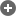
<style>
.page{position:relative;width:16px;height:16px;background:#666666}
.page>*{position:absolute;margin:0}
.t1{font:14px "Arial-Black";color:#ffffff}
</style>
<div class="page">
<p class="t1" style="left:4px;top:4px;width:8px;height:8px">+</p>
</div>
